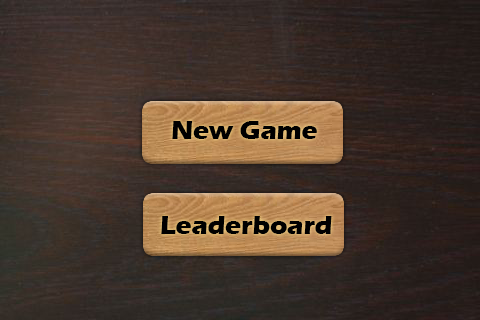
<style>
.page{position:relative;width:480px;height:320px}
.page>*{position:absolute;margin:0}
.t1{font:26.7px "ErasITC-Bold";color:#000000}
</style>
<div class="page">
<p class="t1" style="left:172px;top:121px;width:145px;height:18px">New Game</p>
<p class="t1" style="left:161px;top:216px;width:171px;height:18px">Leaderboard</p>
</div>
